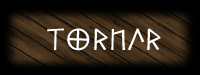
<style>
.page{position:relative;width:200px;height:75px}
.page>*{position:absolute;margin:0}
.t1{font:32px "Alfabetix";color:#ffffff}
</style>
<div class="page">
<p class="t1" style="left:47px;top:28px;width:114px;height:23px">TOrnar</p>
</div>
